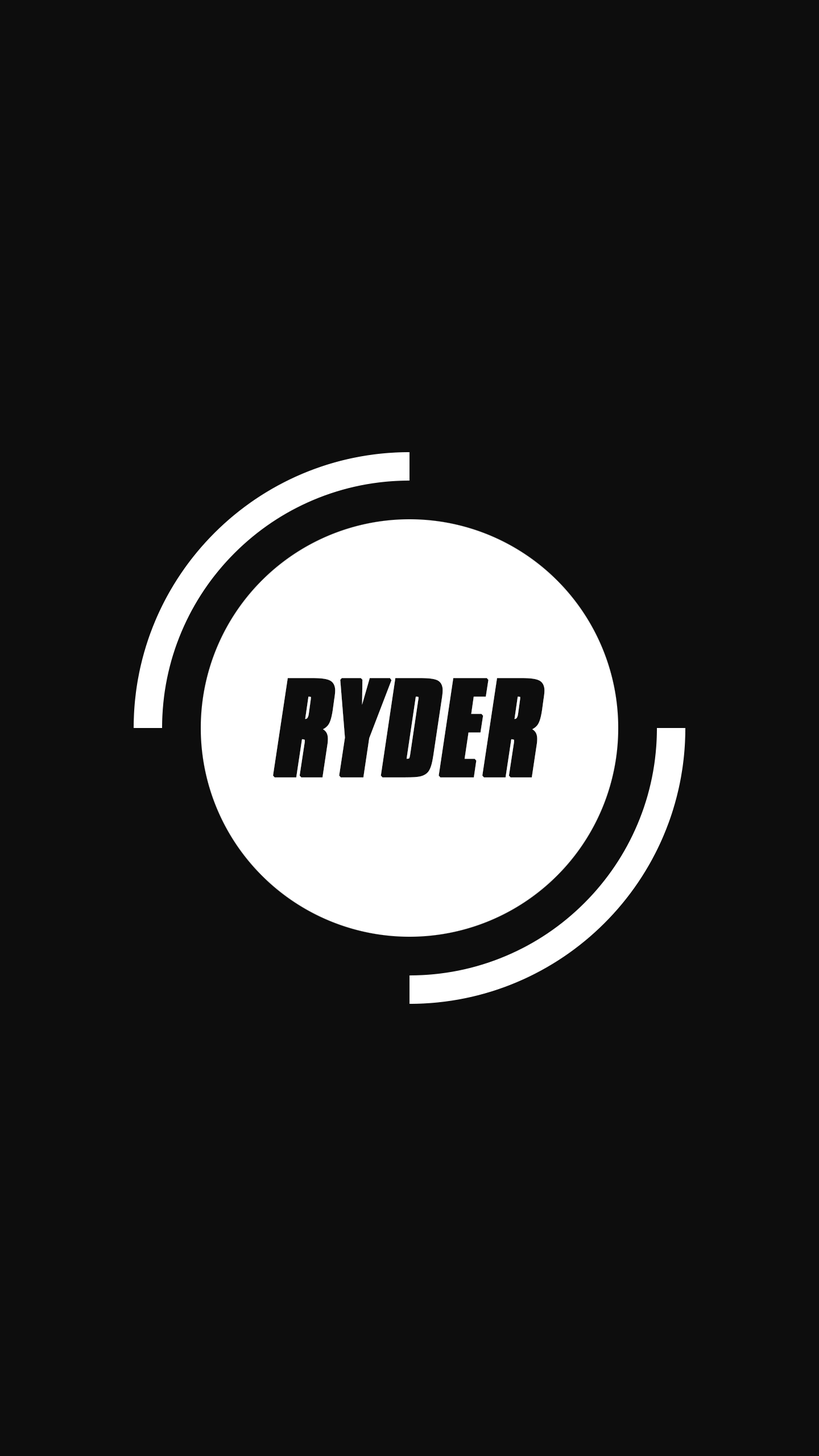
<style>
.page{position:relative;width:819px;height:1456px;background:#0d0d0d}
.page>*{position:absolute;margin:0}
.t1{font:118.5px "CompactaBT-BoldItalic";color:#0d0d0d;text-transform:uppercase;font-weight:bold}
</style>
<div class="page">
<p class="t1" style="left:273px;top:678px;width:272px;height:99px">Ryder</p>
</div>
